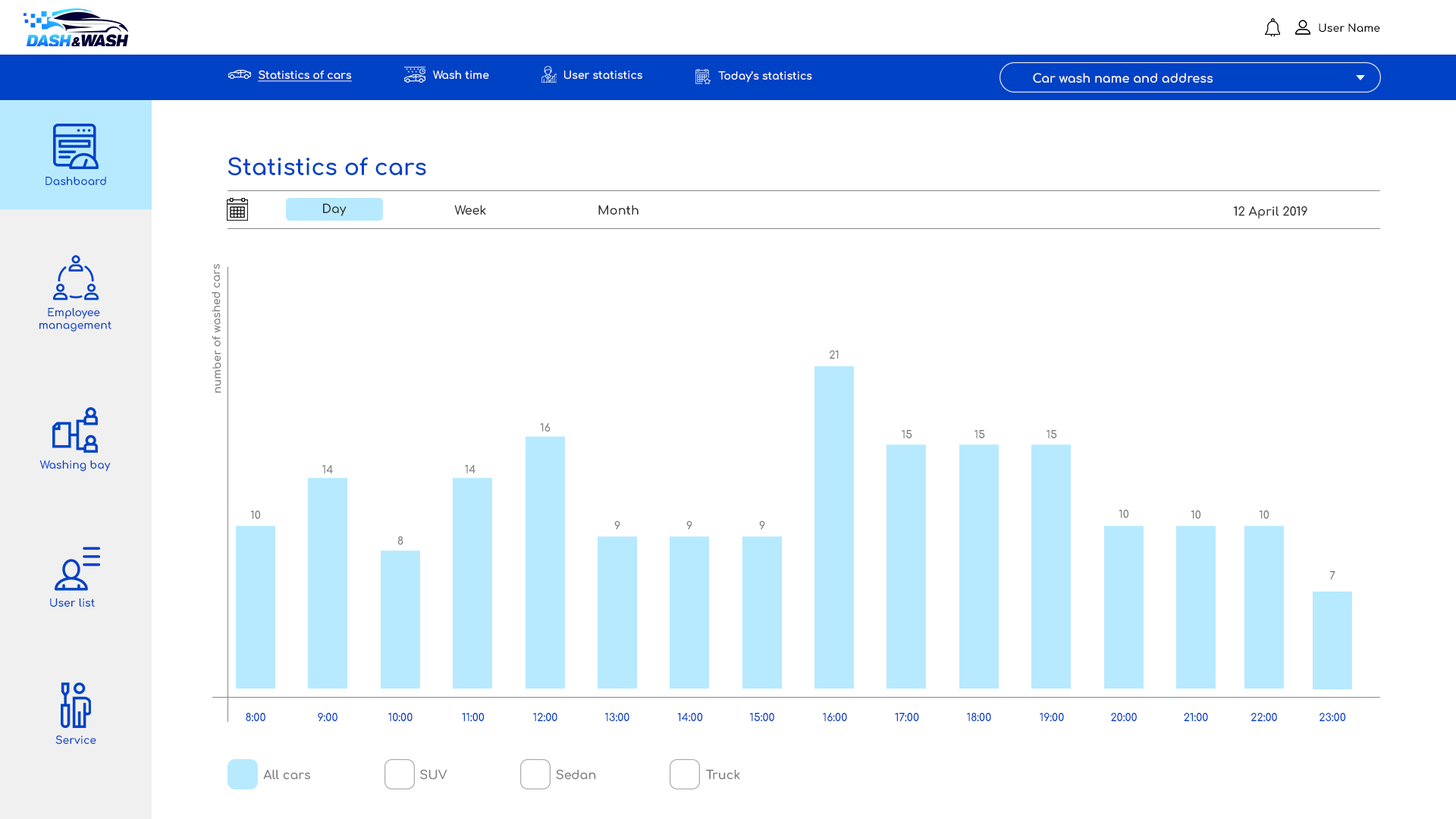
<style>
.page{position:relative;width:1456px;height:819px;background:#ffffff}
.page>*{position:absolute;margin:0}
.t1{font:10.6px "Comfortaa-Bold";color:#010101}
.t2{font:10.6px "Comfortaa-Bold";color:#ffffff;text-decoration:underline}
.t3{font:10.6px "Comfortaa-Bold";color:#ffffff}
.t4{font:12.1px "Comfortaa-Bold";color:#ffffff}
.t5{font:22.7px "Comfortaa-Bold";color:#0042c5}
.t6{font:10.6px "Comfortaa-Bold";color:#0042c5}
.t7{font:12.1px "Comfortaa-Bold";color:#303030}
.t8{font:12.1px "Comfortaa-Bold";color:#393939}
.t9{font:10.6px "Comfortaa-Bold";color:#7e7e7e}
.t10{font:12.1px "Comfortaa-Bold";color:#7e7e7e}
</style>
<div class="page">
<p class="t1" style="left:1319px;top:24px;width:61px;height:9px">User Name</p>
<p class="t2" style="left:258px;top:70px;width:94px;height:12px">Statistics of cars</p>
<p class="t3" style="left:433px;top:71px;width:56px;height:8px">Wash time</p>
<p class="t3" style="left:564px;top:71px;width:78px;height:9px">User statistics</p>
<p class="t3" style="left:718px;top:71px;width:94px;height:12px">Today’s statistics</p>
<p class="t4" style="left:1033px;top:73px;width:180px;height:10px">Car wash name and address</p>
<p class="t5" style="left:228px;top:157px;width:198px;height:19px">Statistics of cars</p>
<p class="t6" style="left:45px;top:177px;width:61px;height:8px">Dashboard</p>
<p class="t7" style="left:323px;top:203px;width:24px;height:13px">Day</p>
<p class="t7" style="left:454px;top:205px;width:32px;height:10px">Week</p>
<p class="t7" style="left:598px;top:205px;width:41px;height:10px">Month</p>
<p class="t8" style="left:1233px;top:206px;width:74px;height:13px">12 April 2019</p>
<p class="t9" style="left:212px;top:264px;width:9px;height:129px;rotate:-91deg">number of washed cars</p>
<p class="t6" style="left:39px;top:308px;width:72px;height:23px;text-align:center">Employee <br>management</p>
<p class="t9" style="left:830px;top:350px;width:9px;height:9px">21</p>
<p class="t9" style="left:540px;top:423px;width:11px;height:8px">16</p>
<p class="t9" style="left:902px;top:430px;width:10px;height:8px">15</p>
<p class="t9" style="left:974px;top:430px;width:11px;height:8px">15</p>
<p class="t9" style="left:1046px;top:430px;width:11px;height:8px">15</p>
<p class="t6" style="left:39px;top:460px;width:72px;height:12px">Washing bay</p>
<p class="t9" style="left:322px;top:465px;width:11px;height:9px">14</p>
<p class="t9" style="left:465px;top:465px;width:10px;height:8px">14</p>
<p class="t9" style="left:1119px;top:510px;width:10px;height:8px">10</p>
<p class="t9" style="left:250px;top:510px;width:11px;height:9px">10</p>
<p class="t9" style="left:614px;top:521px;width:6px;height:8px">9</p>
<p class="t9" style="left:686px;top:521px;width:6px;height:8px">9</p>
<p class="t9" style="left:759px;top:521px;width:6px;height:8px">9</p>
<p class="t9" style="left:1191px;top:510px;width:10px;height:9px">10</p>
<p class="t9" style="left:1259px;top:510px;width:10px;height:9px">10</p>
<p class="t9" style="left:397px;top:536px;width:6px;height:9px">8</p>
<p class="t9" style="left:1329px;top:571px;width:6px;height:8px">7</p>
<p class="t6" style="left:50px;top:598px;width:45px;height:9px">User list</p>
<p class="t6" style="left:246px;top:712px;width:19px;height:10px">8:00</p>
<p class="t6" style="left:318px;top:713px;width:19px;height:9px">9:00</p>
<p class="t6" style="left:388px;top:713px;width:25px;height:9px">10:00</p>
<p class="t6" style="left:462px;top:713px;width:23px;height:9px">11:00</p>
<p class="t6" style="left:533px;top:713px;width:24px;height:9px">12:00</p>
<p class="t6" style="left:605px;top:713px;width:24px;height:9px">13:00</p>
<p class="t6" style="left:677px;top:713px;width:26px;height:9px">14:00</p>
<p class="t6" style="left:750px;top:713px;width:24px;height:9px">15:00</p>
<p class="t6" style="left:823px;top:713px;width:24px;height:9px">16:00</p>
<p class="t6" style="left:895px;top:713px;width:24px;height:9px">17:00</p>
<p class="t6" style="left:967px;top:712px;width:24px;height:10px">18:00</p>
<p class="t6" style="left:1040px;top:713px;width:24px;height:9px">19:00</p>
<p class="t6" style="left:1111px;top:713px;width:26px;height:9px">20:00</p>
<p class="t6" style="left:1184px;top:713px;width:24px;height:9px">21:00</p>
<p class="t6" style="left:1251px;top:713px;width:26px;height:9px">22:00</p>
<p class="t6" style="left:1319px;top:713px;width:27px;height:9px">23:00</p>
<p class="t6" style="left:55px;top:735px;width:41px;height:10px">Service</p>
<p class="t10" style="left:263px;top:770px;width:47px;height:10px">All cars</p>
<p class="t10" style="left:420px;top:769px;width:27px;height:11px">SUV</p>
<p class="t10" style="left:556px;top:769px;width:40px;height:11px">Sedan</p>
<p class="t10" style="left:706px;top:770px;width:34px;height:10px">Truck</p>
</div>
